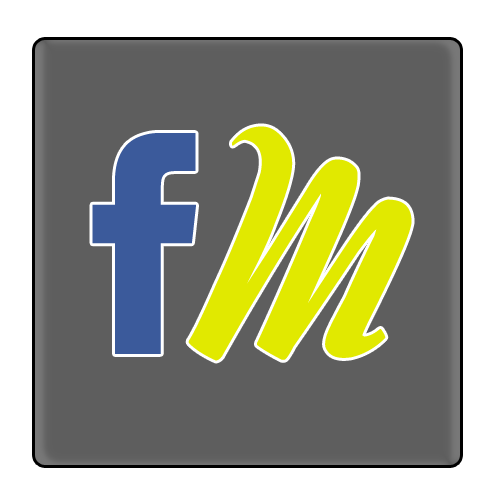
<style>
.page{position:relative;width:500px;height:500px;background:#5e5e5e}
.page>*{position:absolute;margin:0}
.t1{font:320px "BigSurprise";color:#e1e900}
.t2{font:280px "FacebookLetterFaces";color:#3b5a9b}
</style>
<div class="page">
<p class="t1" style="left:188px;top:126px;width:224px;height:235px">M</p>
<p class="t2" style="left:92px;top:133px;width:104px;height:221px">f</p>
</div>
